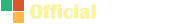
<style>
.page{position:relative;width:178px;height:24px;background:#ffffff}
.page>*{position:absolute;margin:0}
.t1{font:20px "BritannicBold";color:#f9f4a2;font-weight:bold}
</style>
<div class="page">
<p class="t1" style="left:30px;top:4px;width:66px;height:15px">Official</p>
</div>
